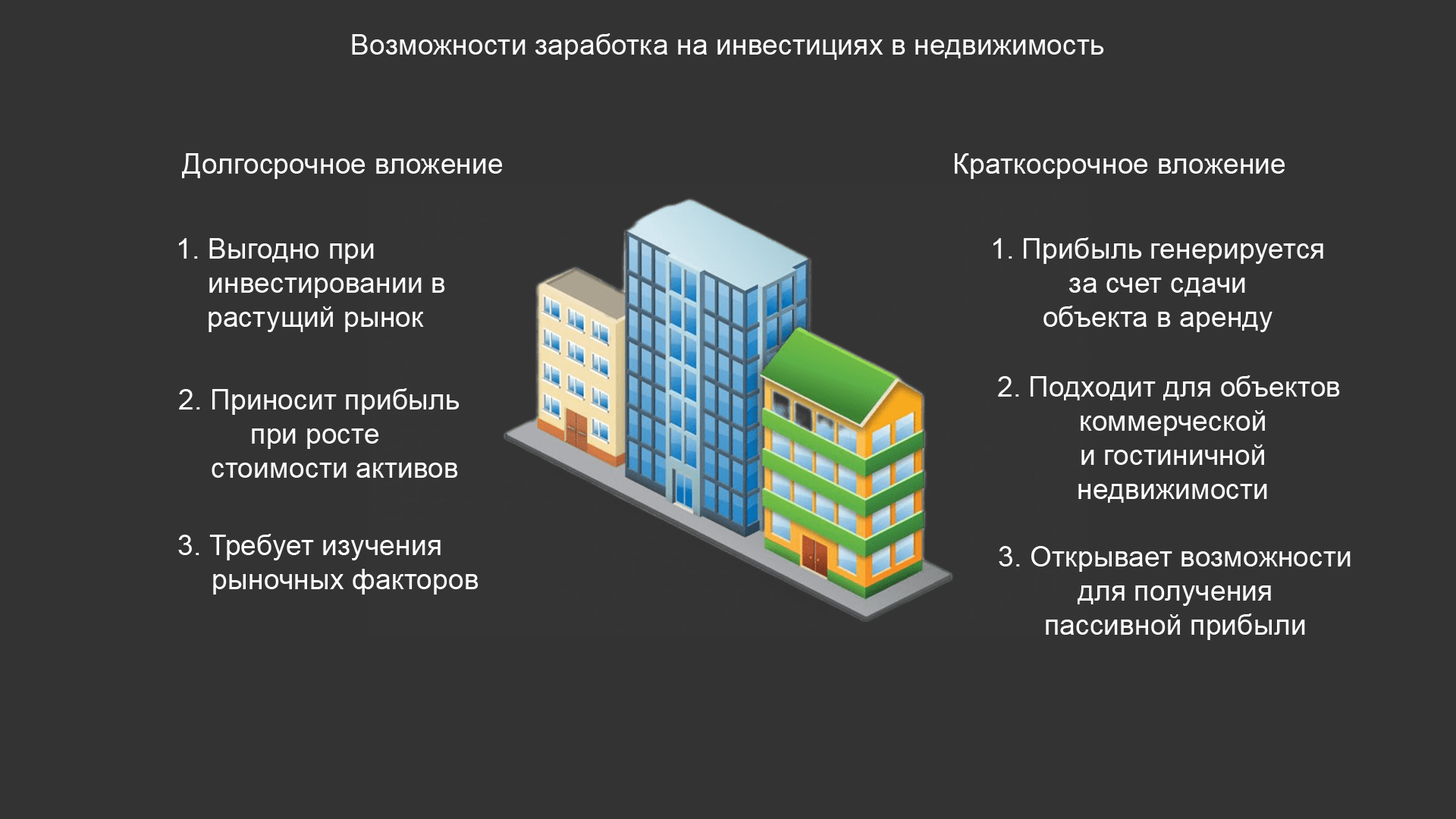
<style>
.page{position:relative;width:1456px;height:819px;background:#333333}
.page>*{position:absolute;margin:0}
.t1{font:28.4px "ArialMT";color:#fefefe}
.t2{font:28.4px "ArialMT";color:#ffffff}
</style>
<div class="page">
<p class="t1" style="left:352px;top:33px;width:752px;height:27px">Возможности заработка на инвестициях в недвижимость</p>
<p class="t2" style="left:182px;top:153px;width:320px;height:26px">Долгосрочное вложение</p>
<p class="t2" style="left:955px;top:153px;width:330px;height:26px">Краткосрочное вложение</p>
<p class="t2" style="left:179px;top:238px;width:266px;height:94px;text-align:center">1. Выгодно при <br>             инвестировании в <br>         растущий рынок</p>
<p class="t2" style="left:993px;top:237px;width:330px;height:95px;text-align:center">1. Прибыль генерируется<br>за счет сдачи<br>объекта в аренду</p>
<p class="t1" style="left:998px;top:375px;width:342px;height:128px;text-align:center">2. Подходит для объектов <br>коммерческой<br>и гостиничной<br>недвижимости</p>
<p class="t2" style="left:179px;top:388px;width:281px;height:90px;text-align:center">2. Приносит прибыль<br>при росте <br>    стоимости активов</p>
<p class="t2" style="left:178px;top:534px;width:301px;height:61px;text-align:center">3. Требует изучения <br>        рыночных факторов</p>
<p class="t2" style="left:999px;top:546px;width:352px;height:94px;text-align:center">3. Открывает возможности<br>для получения<br>пассивной прибыли</p>
</div>
